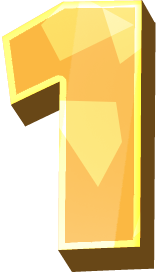
<style>
.page{position:relative;width:157px;height:276px;background:#ffffff}
.page>*{position:absolute;margin:0}
.t1{font:399.6px "Troika"}
</style>
<div class="page">
<p class="t1" style="left:2px;top:0px;width:140px;height:251px">1</p>
</div>
